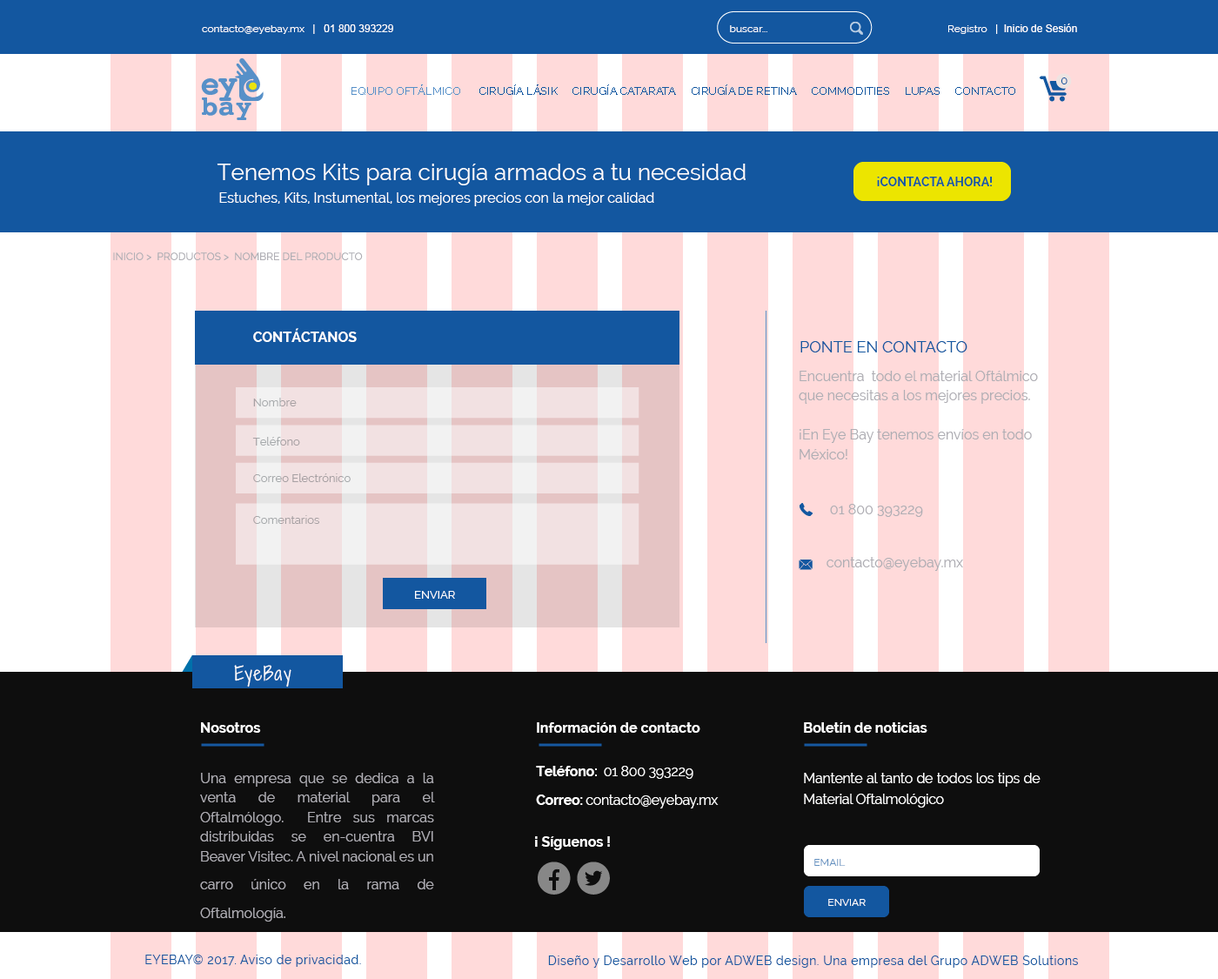
<style>
.page{position:relative;width:1218px;height:979px;background:#0e0e0e}
.page>*{position:absolute;margin:0}
.t1{font:10.4px "Raleway";color:#ffffff}
.t2{font:10.4px "ArialMT";color:#ffffff}
.t3{font:11.3px "Raleway";color:#1357a0;text-transform:uppercase}
.t4{font:22.7px "Raleway";color:#ffffff}
.t5{font:12.2px "Raleway-Bold";color:#1357a0;text-transform:uppercase}
.t6{font:13.9px "Raleway";color:#ffffff}
.t7{font:13.9px "Raleway-Bold";color:#ffffff;text-transform:uppercase}
.t8{font:15.7px "Raleway";color:#1357a0;text-transform:uppercase}
.t9{font:13.9px/19.6px "Raleway";color:#afaeb4}
.t10{font:11.3px "Raleway";color:#a69fa2}
.t11{font:11.3px "Raleway";color:#a6aaac}
.t12{font:13.9px/26.6px "Raleway";color:#afaeb4}
.t13{font:11.3px "Raleway";color:#ffffff}
.t14{font:18.3px "ShadowsIntoLight";letter-spacing:0.08em;color:#ffffff}
.t15{font:13.9px/28.3px "Raleway-Bold";color:#ffffff}
.t16{font:13.9px/28.3px "Raleway";color:#afaeb4}
.t17{font:13.9px/21.4px "Raleway-Bold";letter-spacing:-0.02em;color:#ffffff}
.t18{font:13.9px/14.4px "Raleway-Bold";letter-spacing:-0.02em;color:#ffffff}
.t19{font:13.9px/14.4px "Raleway";letter-spacing:-0.02em;color:#ffffff}
.t20{font:13.9px/21.4px "Raleway";letter-spacing:-0.02em;color:#ffffff}
.t21{font:13.9px "Raleway-Bold";color:#ffffff}
.t22{font:10.4px "Raleway";color:#6592c1;text-transform:uppercase}
.t23{font:10.4px "Raleway";color:#ffffff;text-transform:uppercase}
.t24{font:12.2px "Raleway";letter-spacing:0.04em;color:#1357a0}
</style>
<div class="page">
<p class="t1" style="left:202px;top:24px;width:191px;height:10px">contacto@eyebay.mx   <span class="t2">|   01 800 393229</span></p>
<p class="t1" style="left:730px;top:25px;width:37px;height:7px">buscar...</p>
<p class="t2" style="left:948px;top:23px;width:129px;height:11px"><span class="t1">Registro   </span>|  Inicio de Sesión</p>
<p class="t3" style="left:1061px;top:77px;width:7px;height:7px">0</p>
<p class="t4" style="left:217px;top:164px;width:529px;height:21px">Tenemos Kits para cirugía armados a tu necesidad</p>
<p class="t5" style="left:877px;top:177px;width:116px;height:9px">¡Contacta ahora!</p>
<p class="t6" style="left:219px;top:192px;width:435px;height:14px">Estuches, Kits, Instumental, los mejores precios con la mejor calidad</p>
<p class="t7" style="left:253px;top:328px;width:104px;height:14px">contáctanos</p>
<p class="t8" style="left:801px;top:341px;width:167px;height:11px">ponte en contacto</p>
<p class="t9" style="left:799px;top:371px;width:239px;height:88px">Encuentra  todo el material Oftálmico que necesitas a los mejores precios.<br><br>¡En Eye Bay tenemos envíos en todo  México!</p>
<p class="t10" style="left:253px;top:398px;width:44px;height:8px">Nombre</p>
<p class="t11" style="left:252px;top:437px;width:48px;height:8px">Teléfono</p>
<p class="t10" style="left:253px;top:473px;width:98px;height:9px">Correo Electrónico</p>
<p class="t12" style="left:827px;top:504px;width:136px;height:67px">01 800 393229  <br><br>contacto@eyebay.mx</p>
<p class="t10" style="left:253px;top:515px;width:66px;height:9px">Comentarios</p>
<p class="t13" style="left:415px;top:591px;width:40px;height:8px">ENVIAR</p>
<p class="t14" style="left:234px;top:665px;width:57px;height:22px">EyeBay</p>
<p class="t9" style="left:200px;top:722px;width:235px;height:199px;text-align:justify"><span class="t15">Nosotros<br><br></span><span class="t16">U</span>na empresa que se dedica a la venta de material para el Oftalmólogo.  Entre sus marcas distribuidas se en-cuentra BVI Beaver Visitec. A nivel nacional es un carro único en <span class="t16">la rama de Oftalmología.</span></p>
<p class="t15" style="left:536px;top:722px;width:183px;height:86px;text-align:justify">Información de contacto<br><br><span class="t17">T</span><span class="t18">eléfono: </span><span class="t19"> 01 800 393229  <br><br></span><span class="t18">Correo: </span><span class="t19">contacto@eyebay.mx</span></p>
<p class="t20" style="left:804px;top:722px;width:237px;height:85px;text-align:justify"><span class="t15">Boletín de noticias<br><br></span>Mantente al tanto de todos los tips de Material Oftalmológico</p>
<p class="t21" style="left:535px;top:836px;width:75px;height:14px">¡ Síguenos !</p>
<p class="t22" style="left:814px;top:859px;width:32px;height:7px">EMAIL</p>
<p class="t23" style="left:828px;top:899px;width:38px;height:7px">enviar</p>
<p class="t24" style="left:145px;top:955px;width:216px;height:12px">EYEBAY© 2017. Aviso de privacidad.</p>
<p class="t24" style="left:548px;top:955px;width:530px;height:13px">Diseño y Desarrollo Web por ADWEB design. Una empresa del Grupo ADWEB Solutions</p>
</div>
